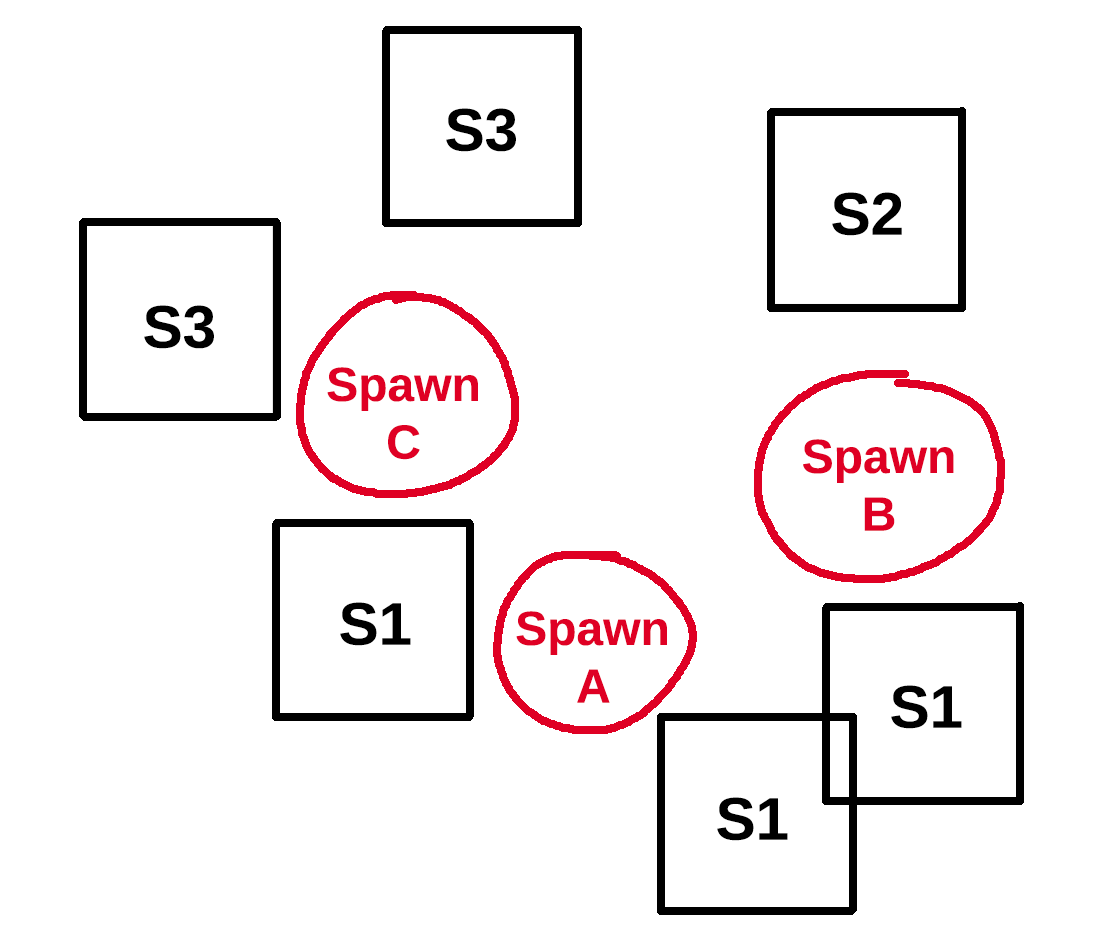
<style>
.page{position:relative;width:1100px;height:943px;background:#ffffff}
.page>*{position:absolute;margin:0}
.t1{font:60px "LiberationSans-Bold";color:#000000}
.t2{font:48px "LiberationSans-Bold";color:#df0024}
</style>
<div class="page">
<p class="t1" style="left:446px;top:108px;width:70px;height:44px">S3</p>
<p class="t1" style="left:832px;top:192px;width:70px;height:44px">S2</p>
<p class="t1" style="left:144px;top:305px;width:70px;height:44px">S3</p>
<p class="t2" style="left:327px;top:367px;width:151px;height:93px;text-align:center">Spawn<br>C</p>
<p class="t2" style="left:803px;top:439px;width:151px;height:92px;text-align:center">Spawn<br>B</p>
<p class="t1" style="left:340px;top:602px;width:71px;height:44px">S1</p>
<p class="t2" style="left:516px;top:611px;width:151px;height:92px;text-align:center">Spawn<br>A</p>
<p class="t1" style="left:891px;top:685px;width:71px;height:44px">S1</p>
<p class="t1" style="left:717px;top:797px;width:71px;height:44px">S1</p>
</div>
